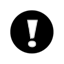
<style>
.page{position:relative;width:64px;height:64px;background:#ffffff}
.page>*{position:absolute;margin:0}
.t1{font:36px "ShowcardGothic-Reg";letter-spacing:-0.05em;color:#ffffff;font-weight:bold}
</style>
<div class="page">
<p class="t1" style="left:26px;top:19px;width:12px;height:29px">!</p>
</div>
